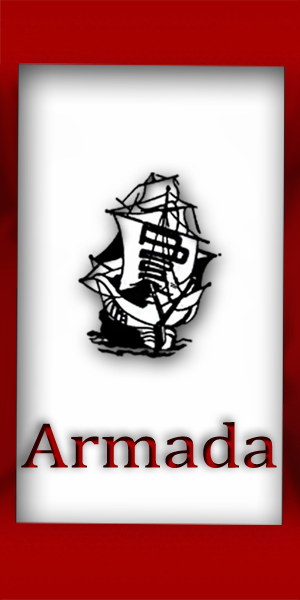
<style>
.page{position:relative;width:300px;height:600px}
.page>*{position:absolute;margin:0}
.t1{font:64.6px "CambriaMath";scale:1.17 1}
</style>
<div class="page">
<p class="t1" style="left:21px;top:422px;width:256px;height:46px">Armada</p>
</div>
